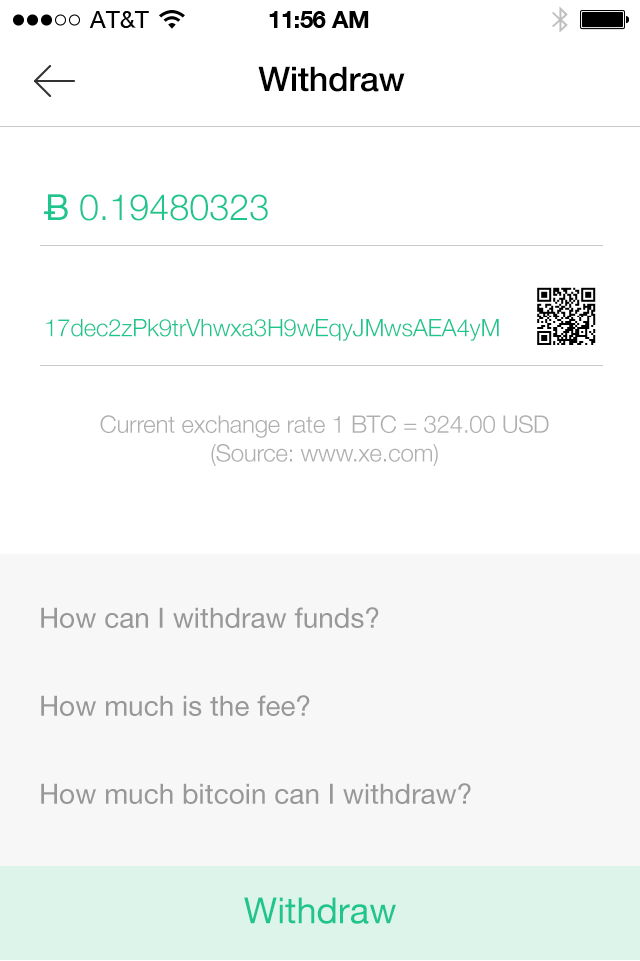
<style>
.page{position:relative;width:640px;height:961px;background:#ffffff}
.page>*{position:absolute;margin:0}
.t1{font:34px "HelveticaNeue-Medium";letter-spacing:-0.01em;color:#000000}
.t2{font:36px "HelveticaNeue-Light";color:#1ec68e}
.t3{font:36px "HelveticaNeue";color:#1ec68e}
.t4{font:24px "HelveticaNeue-Light";letter-spacing:-0.01em;color:#1ec68e}
.t5{font:24px "HelveticaNeue-Light";letter-spacing:-0.01em;color:#afafaf}
.t6{font:28px "HelveticaNeue";color:#989898}
</style>
<div class="page">
<p class="t1" style="left:258px;top:66px;width:147px;height:26px">Withdraw</p>
<p class="t2" style="left:44px;top:194px;width:224px;height:27px"><span class="t3">Ƀ</span> 0.19480323</p>
<p class="t4" style="left:46px;top:319px;width:453px;height:22px">17dec2zPk9trVhwxa3H9wEqyJMwsAEA4yM</p>
<p class="t5" style="left:100px;top:415px;width:449px;height:51px;text-align:center">Current exchange rate 1 BTC = 324.00 USD<br>(Source: www.xe.com)</p>
<p class="t6" style="left:41px;top:607px;width:338px;height:21px">How can I withdraw funds?</p>
<p class="t6" style="left:41px;top:695px;width:269px;height:21px">How much is the fee?</p>
<p class="t6" style="left:41px;top:783px;width:430px;height:21px">How much bitcoin can I withdraw?</p>
<p class="t3" style="left:244px;top:897px;width:152px;height:27px">Withdraw</p>
</div>
